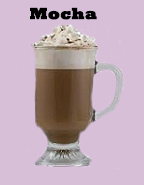
<style>
.page{position:relative;width:144px;height:185px;background:#d8bfd8}
.page>*{position:absolute;margin:0}
.t1{font:12px "Rockwell-ExtraBold";color:#000000;font-weight:bold}
</style>
<div class="page">
<p class="t1" style="left:30px;top:7px;width:67px;height:13px">Mocha</p>
</div>
